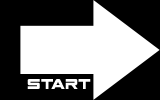
<style>
.page{position:relative;width:160px;height:100px;background:#000000}
.page>*{position:absolute;margin:0}
.t1{font:20px "SpaceRanger";color:#ffffff}
</style>
<div class="page">
<p class="t1" style="left:27px;top:79px;width:64px;height:10px">start</p>
</div>
